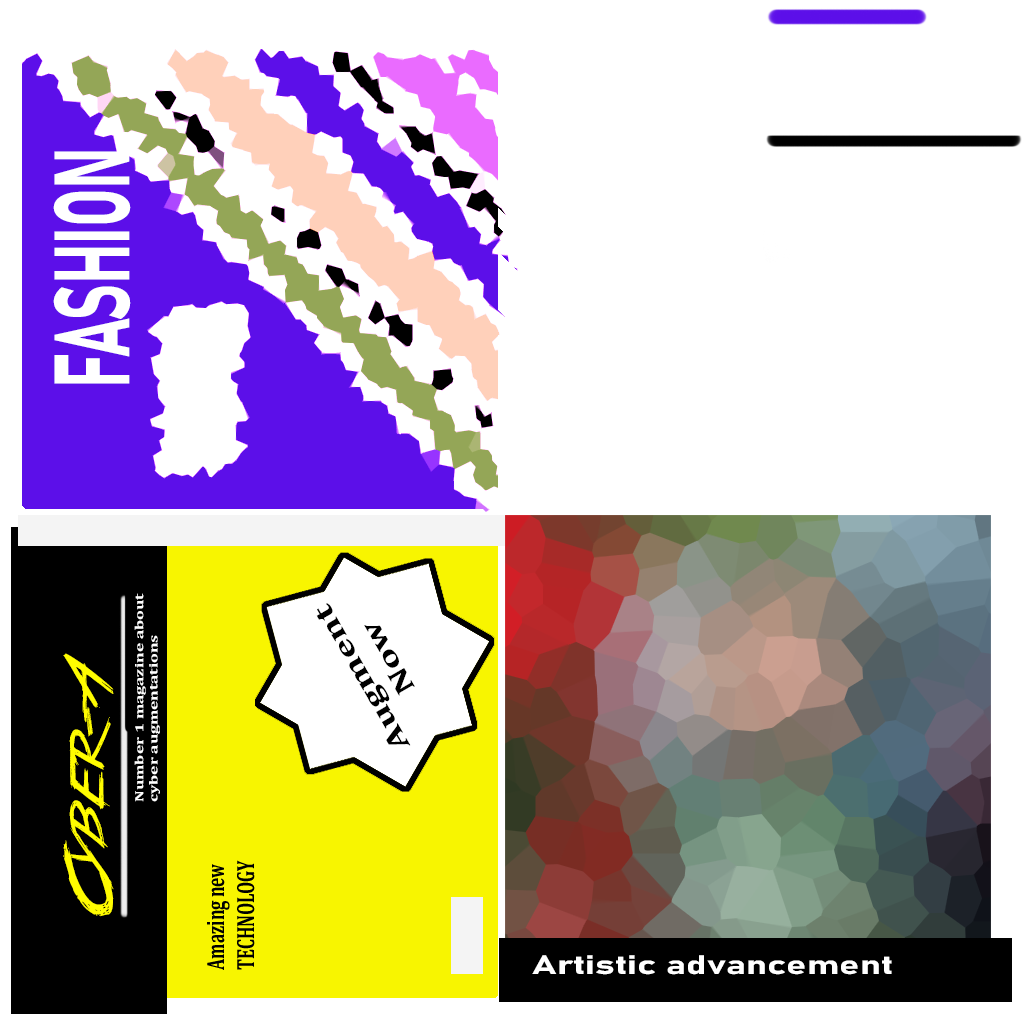
<style>
.page{position:relative;width:1024px;height:1024px;background:#ffffff}
.page>*{position:absolute;margin:0}
.t1{font:105px "Bahnschrift-Bold";color:#ffffff;scale:0.57 1}
.t2{font:12px "Cambria-Bold";color:#ffffff;scale:1.44 1}
.t3{font:27.5px "Cambria-Bold";color:#000000;scale:1.44 1}
.t4{font:48px "TrueLies";color:#fffc00;scale:1.44 1}
.t5{font:26.5px "Bahnschrift-Bold";color:#ffffff;scale:1.44 1}
</style>
<div class="page">
<p class="t1" style="left:53px;top:151px;width:78px;height:233px;rotate:-90deg">FASHION</p>
<p class="t2" style="left:134px;top:593px;width:26px;height:209px;rotate:-90deg">Number 1 magazine about <br>cyber augmentations</p>
<p class="t3" style="left:316px;top:603px;width:99px;height:143px;text-align:center;rotate:-120deg">Augment <br>Now</p>
<p class="t4" style="left:63px;top:653px;width:51px;height:264px;rotate:-90deg">Cyber-A</p>
<p class="t5" style="left:532px;top:955px;width:360px;height:20px">Artistic advancement</p>
</div>
